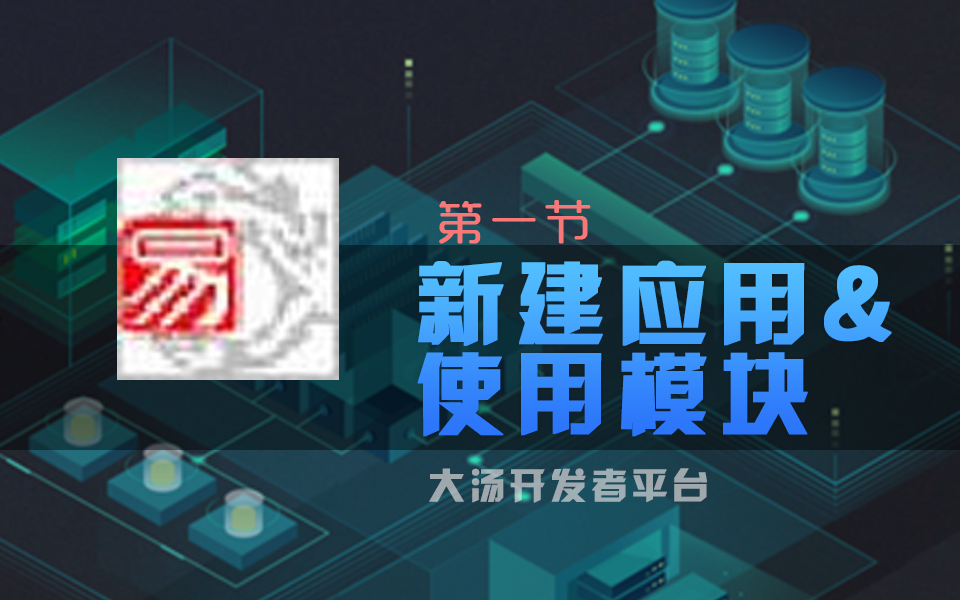
<style>
.page{position:relative;width:960px;height:600px}
.page>*{position:absolute;margin:0}
.t1{font:48px "MFYueYuan_Noncommercial-Regular";letter-spacing:0.1em;color:#f87878;font-weight:bold}
.t2{font:90px/90px "JLinXin";letter-spacing:0.1em;font-weight:bold}
.t3{font:36px "JLinXin";letter-spacing:0.1em;color:#9faaaf;font-weight:bold}
</style>
<div class="page">
<p class="t1" style="left:439px;top:200px;width:152px;height:44px">第一节</p>
<p class="t2" style="left:417px;top:260px;width:475px;height:177px">新建应用&amp;<br>使用模块</p>
<p class="t3" style="left:429px;top:468px;width:278px;height:35px">大汤开发者平台</p>
</div>
